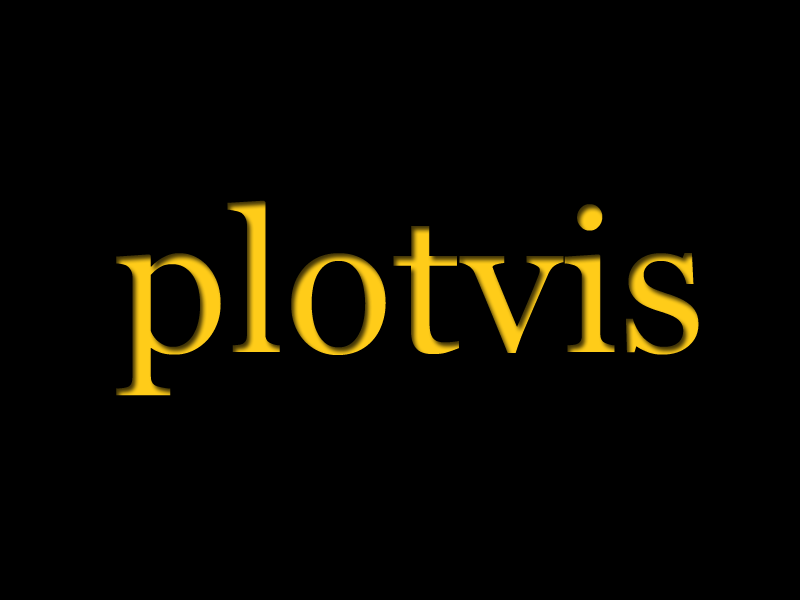
<style>
.page{position:relative;width:800px;height:600px;background:#000000}
.page>*{position:absolute;margin:0}
.t1{font:200px "Georgia";color:#ffcc19}
</style>
<div class="page">
<p class="t1" style="left:116px;top:200px;width:583px;height:196px">plotvis</p>
</div>
